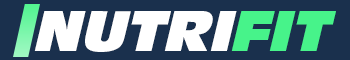
<style>
.page{position:relative;width:350px;height:60px;background:#1a304d}
.page>*{position:absolute;margin:0}
.t1{font:60px "AntiqueOliT-CompItal";color:#ffffff}
.t2{font:60px "AntiqueOliT-CompItal";color:#47f38a}
</style>
<div class="page">
<p class="t1" style="left:34px;top:11px;width:302px;height:41px">NUTRI<span class="t2">FIT</span></p>
</div>
